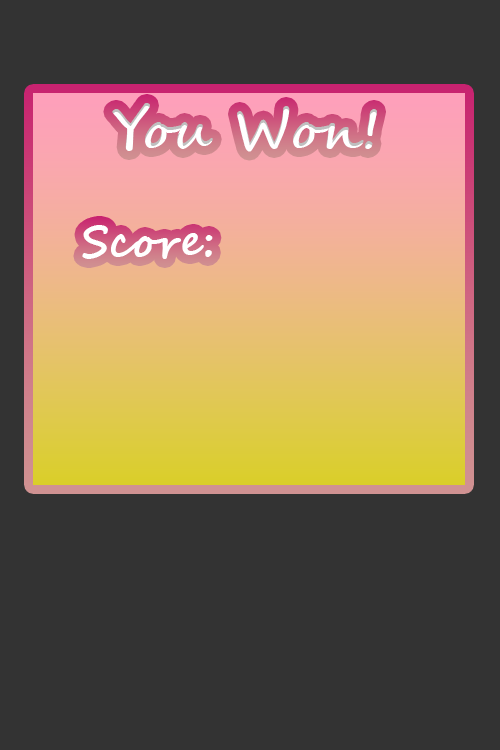
<style>
.page{position:relative;width:500px;height:750px;background:#333333}
.page>*{position:absolute;margin:0}
.t1{font:55px "SegoeScript-Bold";color:#ffffff}
.t2{font:44px "SegoeScript-Bold";color:#ffffff}
</style>
<div class="page">
<p class="t1" style="left:112px;top:103px;width:265px;height:49px">You Won!</p>
<p class="t2" style="left:82px;top:225px;width:131px;height:34px">Score:</p>
</div>
